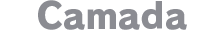
<style>
.page{position:relative;width:224px;height:38px;background:#ffffff}
.page>*{position:absolute;margin:0}
.t1{font:36px "RodinPro-EB";letter-spacing:0.001em;color:#8b8c92}
</style>
<div class="page">
<p class="t1" style="left:38px;top:0px;width:149px;height:30px">Camada</p>
</div>
